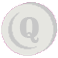
<style>
.page{position:relative;width:58px;height:58px;background:#e6e6e1}
.page>*{position:absolute;margin:0}
.t1{font:32px "BritannicBold";letter-spacing:0.1em;color:#c7c7c7}
</style>
<div class="page">
<p class="t1" style="left:19px;top:17px;width:20px;height:26px">Q</p>
</div>
